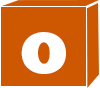
<style>
.page{position:relative;width:100px;height:88px;background:#ce5802}
.page>*{position:absolute;margin:0}
.t1{font:79.3px "ChunkFive-Regular";color:#ffffff}
</style>
<div class="page">
<p class="t1" style="left:21px;top:32px;width:45px;height:42px">o</p>
</div>
